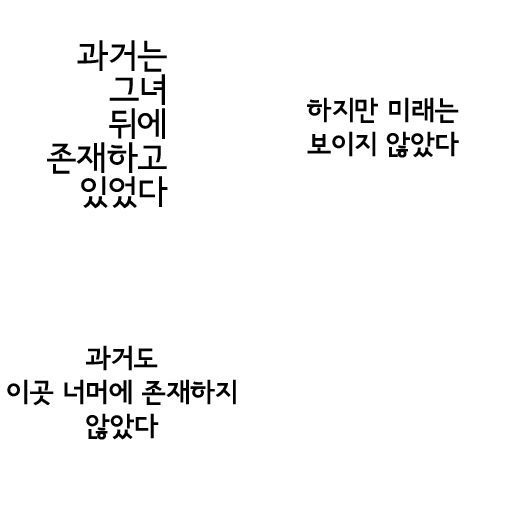
<style>
.page{position:relative;width:512px;height:512px;background:#ffffff}
.page>*{position:absolute;margin:0}
.t1{font:34px/34px "SeoulNamsanB";color:#000000}
.t2{font:27px/34px "SeoulNamsanEB";color:#000000}
</style>
<div class="page">
<p class="t1" style="left:47px;top:40px;width:121px;height:169px;text-align:right">과거는<br>그녀<br>뒤에<br>존재하고<br>있었다</p>
<p class="t2" style="left:307px;top:97px;width:152px;height:61px;text-align:center">하지만 미래는<br>보이지 않았다</p>
<p class="t2" style="left:7px;top:345px;width:229px;height:95px;text-align:center">과거도<br>이곳 너머에 존재하지<br>않았다</p>
</div>
